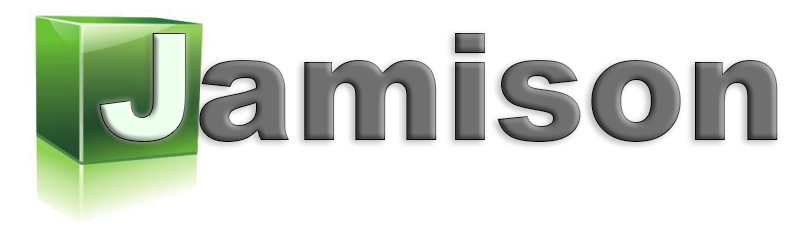
<style>
.page{position:relative;width:800px;height:230px;background:#ffffff}
.page>*{position:absolute;margin:0}
.t1{font:150px "Arial-Black";color:#6f6f6f}
.t2{font:150px "Arial-Black";color:#edffed}
</style>
<div class="page">
<p class="t1" style="left:99px;top:33px;width:679px;height:109px"><span class="t2">J</span>amison</p>
</div>
